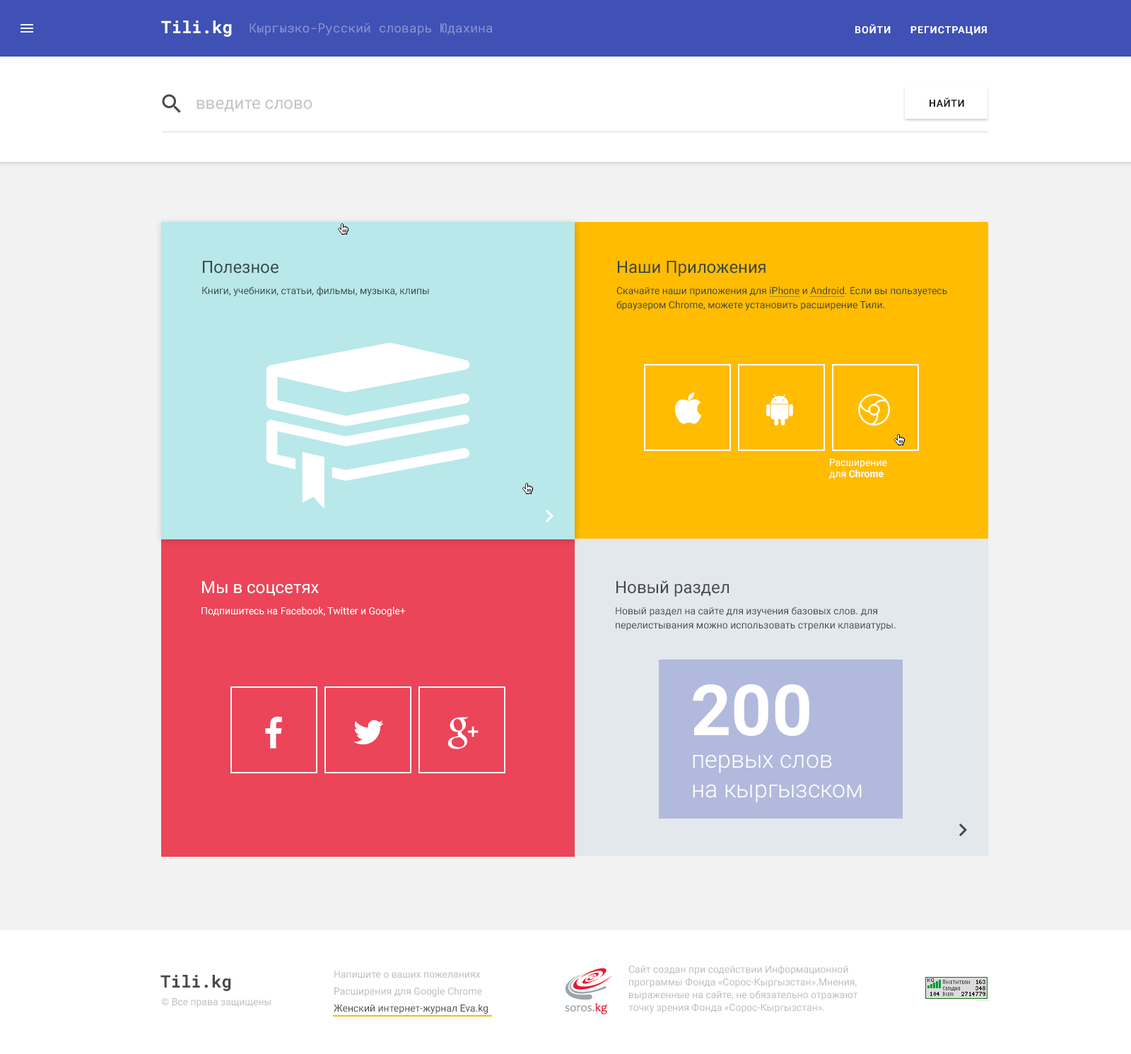
<style>
.page{position:relative;width:1131px;height:1054px;background:#f2f2f2}
.page>*{position:absolute;margin:0}
.t1{font:17px "RobotoMono-Bold";color:#ffffff}
.t2{font:12.7px "RobotoMono-Regular";color:#8a93cd}
.t3{font:9.9px "Roboto-Bold";letter-spacing:0.075em;color:#ffffff;text-transform:uppercase}
.t4{font:17px "Roboto-Regular";color:#c3c3c4}
.t5{font:9.9px "Roboto-Bold";letter-spacing:0.05em;color:#222228;text-transform:uppercase}
.t6{font:9.9px/21.2px "Roboto-Regular";color:#384545}
.t7{font:17px/21.2px "Roboto-Regular";color:#384545}
.t8{font:9.9px/14.1px "Roboto-Regular";color:#384545}
.t9{font:9.9px "Roboto-Regular";color:#ffffff}
.t10{font:9.9px "Roboto-Bold";color:#ffffff}
.t11{font:9.9px/21.2px "Roboto-Regular";color:#ffffff}
.t12{font:17px/21.2px "Roboto-Regular";color:#ffffff}
.t13{font:9.9px/14.1px "Roboto-Regular";color:#484849}
.t14{font:17px/21.2px "Roboto-Regular";color:#484849}
.t15{font:9.9px/21.2px "Roboto-Regular";color:#484849}
.t16{font:70.7px "Roboto-Bold";color:#ffffff}
.t17{font:24px "Roboto-Light";color:#ffffff}
.t18{font:9.9px/12.7px "Roboto-Regular";color:#bdbdbd}
.t19{font:17px "RobotoMono-Bold";color:#484849}
.t20{font:17px "RobotoMono-Bold";color:#484849;text-transform:uppercase}
.t21{font:9.9px/17px "Roboto-Regular";color:#bdbdbd}
.t22{font:9.9px/17px "Roboto-Regular";color:#484849}
.t23{font:9.9px "Roboto-Regular";color:#bdbdbd}
</style>
<div class="page">
<p class="t1" style="left:161px;top:21px;width:71px;height:16px">Tili.kg</p>
<p class="t2" style="left:250px;top:23px;width:243px;height:12px">Кыргызко-Русский словарь Юдахина</p>
<p class="t3" style="left:855px;top:24px;width:36px;height:10px">Войти</p>
<p class="t3" style="left:911px;top:26px;width:76px;height:9px">Регистрация</p>
<p class="t4" style="left:197px;top:100px;width:115px;height:12px">введите слово</p>
<p class="t5" style="left:930px;top:98px;width:34px;height:9px">Найти</p>
<p class="t6" style="left:202px;top:261px;width:227px;height:35px"><span class="t7">Полезное<br></span>Книги, учебники, статьи, фильмы, музыка, клипы</p>
<p class="t6" style="left:617px;top:261px;width:330px;height:49px"><span class="t7">Наши Приложения<br></span>Скачайте наши приложения для iPhone и Android. Если вы пользуетесь <span class="t8">браузером Chrome, можете установить расширение Тили.</span></p>
<p class="t9" style="left:829px;top:459px;width:58px;height:20px">Расширение <br>для <span class="t10">Chrome</span></p>
<p class="t11" style="left:201px;top:581px;width:204px;height:36px"><span class="t12">Мы в соцсетях<br></span>Подпишитесь на Facebook, Twitter и Google+</p>
<p class="t13" style="left:616px;top:580px;width:280px;height:51px"><span class="t14">Новый раздел<br></span><span class="t15">Новый раздел на сайте для изучения базовых слов. для </span>перелистывания можно использовать стрелки клавиатуры.</p>
<p class="t16" style="left:693px;top:684px;width:117px;height:52px">200</p>
<p class="t17" style="left:693px;top:754px;width:139px;height:19px">первых слов</p>
<p class="t17" style="left:693px;top:784px;width:169px;height:18px">на кыргызском</p>
<p class="t18" style="left:629px;top:965px;width:229px;height:48px">Сайт создан при содействии Информационной программы Фонда «Сорос-Кыргызстан».Мнения, выраженные на сайте, не обязательно отражают точку зрения Фонда «Сорос-Кыргызстан».</p>
<p class="t19" style="left:160px;top:975px;width:71px;height:16px"><span class="t20">T</span>ili.kg</p>
<p class="t21" style="left:334px;top:971px;width:154px;height:43px">Напишите о ваших пожеланиях<br>Расширения для Google Chrome<br><span class="t22">Женский интернет-журнал Eva.kg</span></p>
<p class="t23" style="left:161px;top:998px;width:110px;height:9px">© Все права защищены</p>
</div>
